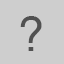
<style>
.page{position:relative;width:64px;height:64px;background:#cecece}
.page>*{position:absolute;margin:0}
.t1{font:48px "Helvetica";color:#515151}
</style>
<div class="page">
<p class="t1" style="left:20px;top:16px;width:22px;height:35px">?</p>
</div>
